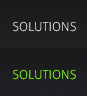
<style>
.page{position:relative;width:87px;height:96px}
.page>*{position:absolute;margin:0}
.t1{font:12.6px "Aller-Light"}
.t2{font:12.6px "Aller-Light";color:#83f901}
</style>
<div class="page">
<p class="t1" style="left:13px;top:21px;width:63px;height:11px">SOLUTIONS</p>
<p class="t2" style="left:13px;top:69px;width:63px;height:11px">SOLUTIONS</p>
</div>
